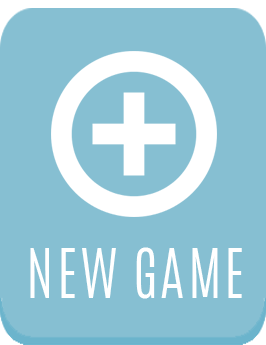
<style>
.page{position:relative;width:266px;height:345px;background:#86bfd2}
.page>*{position:absolute;margin:0}
.t1{font:58.3px "Antonio-Light";letter-spacing:0.045em;color:#ffffff}
</style>
<div class="page">
<p class="t1" style="left:30px;top:247px;width:212px;height:52px">NEW GAME</p>
</div>
